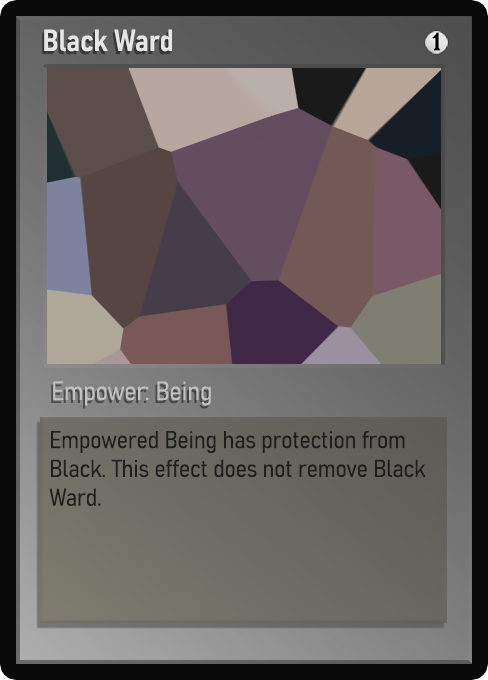
<style>
.page{position:relative;width:488px;height:680px}
.page>*{position:absolute;margin:0}
.t1{font:30px "Bahnschrift-SemiBoldSemiCondensed";color:#f2f2f2;font-weight:bold}
.t2{font:25px "WTRRoycroft";color:#000000;font-weight:bold;scale:1.09 1}
.t3{font:26px "Bahnschrift-LightSemiCondensed";color:#c8c8c8;font-weight:bold}
.t4{font:24px "Bahnschrift-LightSemiCondensed";color:#1e1e1e;font-weight:bold}
</style>
<div class="page">
<p class="t1" style="left:44px;top:29px;width:128px;height:23px;opacity:0.9">Black Ward</p>
<p class="t2" style="left:432px;top:32px;width:9px;height:19px">1</p>
<p class="t3" style="left:53px;top:381px;width:158px;height:25px;opacity:0.9">Empower: Being</p>
<p class="t4" style="left:49px;top:431px;width:377px;height:75px">Empowered Being has protection from Black. This effect does not remove Black Ward.</p>
</div>
